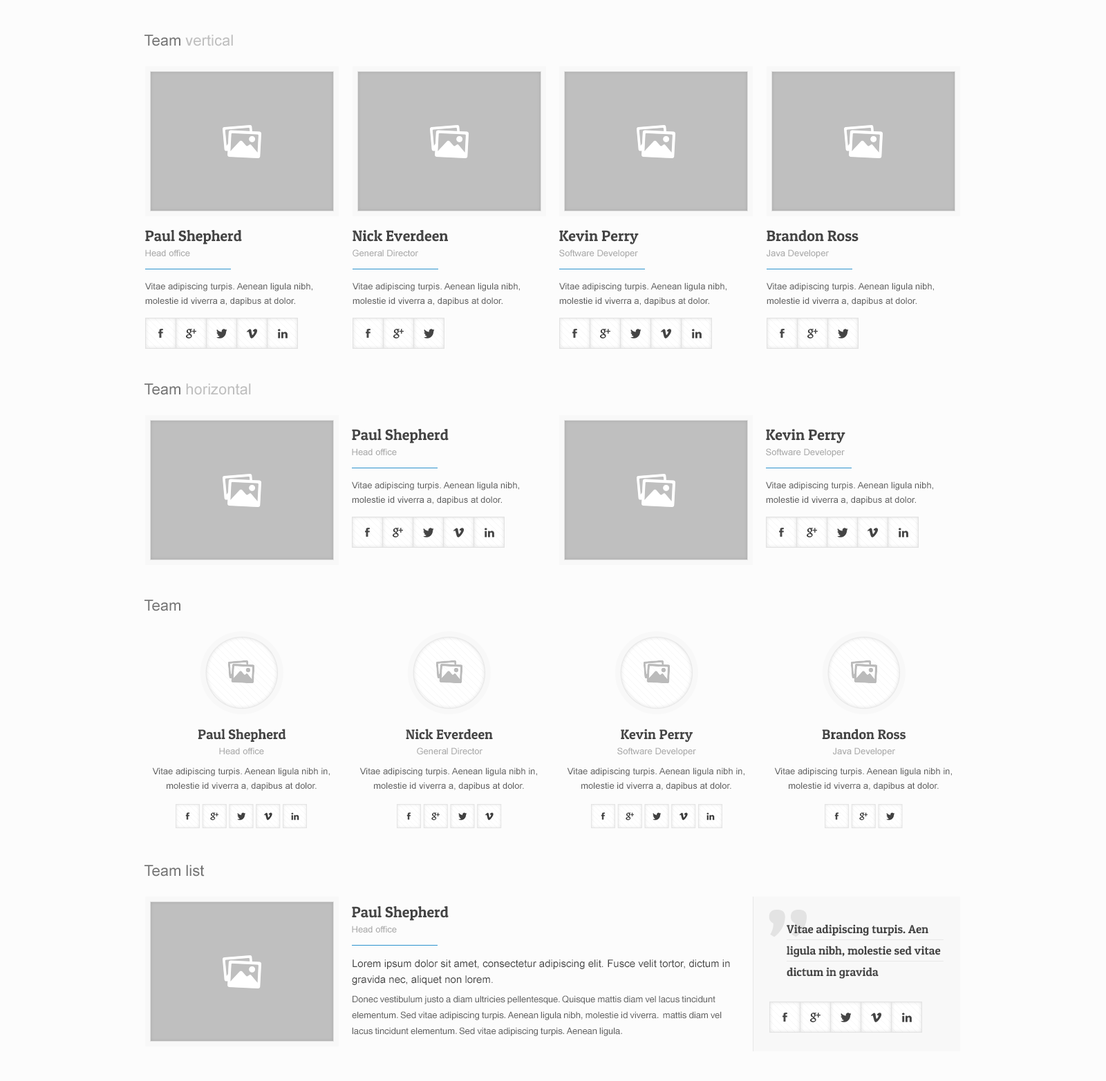
<style>
.page{position:relative;width:1106px;height:1081px;background:#fcfcfc}
.page>*{position:absolute;margin:0}
.t1{font:15.2px "ArialMT";color:#bfbfbf}
.t2{font:15.2px "ArialMT";color:#737373}
.t3{font:15.2px "PatuaOne-Regular";color:#444444}
.t4{font:9px "ArialMT";color:#a8a8a8}
.t5{font:9px/14.5px "ArialMT";color:#626262}
.t6{font:13.8px "PatuaOne-Regular";color:#444444}
.t7{font:11.7px/21.3px "PatuaOne-Regular";color:#444444}
.t8{font:10.4px/15.9px "ArialMT";color:#444444}
.t9{font:9px/15.9px "HelveticaWorld-Regular";color:#626262}
</style>
<div class="page">
<p class="t1" style="left:144px;top:35px;width:89px;height:11px"><span class="t2">Team </span>vertical</p>
<p class="t3" style="left:145px;top:230px;width:97px;height:15px">Paul Shepherd</p>
<p class="t3" style="left:352px;top:230px;width:96px;height:12px">Nick Everdeen</p>
<p class="t3" style="left:559px;top:230px;width:79px;height:15px">Kevin Perry</p>
<p class="t3" style="left:766px;top:230px;width:92px;height:12px">Brandon Ross</p>
<p class="t4" style="left:145px;top:249px;width:45px;height:7px">Head office</p>
<p class="t4" style="left:352px;top:249px;width:66px;height:8px">General Director</p>
<p class="t4" style="left:559px;top:249px;width:79px;height:9px">Software Developer</p>
<p class="t4" style="left:766px;top:249px;width:63px;height:9px">Java Developer</p>
<p class="t5" style="left:145px;top:283px;width:167px;height:23px">Vitae adipiscing turpis. Aenean ligula nibh, molestie id viverra a, dapibus at dolor.</p>
<p class="t5" style="left:352px;top:283px;width:168px;height:23px">Vitae adipiscing turpis. Aenean ligula nibh, molestie id viverra a, dapibus at dolor.</p>
<p class="t5" style="left:559px;top:283px;width:167px;height:23px">Vitae adipiscing turpis. Aenean ligula nibh, molestie id viverra a, dapibus at dolor.</p>
<p class="t5" style="left:766px;top:283px;width:168px;height:23px">Vitae adipiscing turpis. Aenean ligula nibh, molestie id viverra a, dapibus at dolor.</p>
<p class="t1" style="left:144px;top:384px;width:107px;height:11px"><span class="t2">Team </span>horizontal</p>
<p class="t3" style="left:352px;top:429px;width:96px;height:15px">Paul Shepherd</p>
<p class="t3" style="left:766px;top:429px;width:79px;height:15px">Kevin Perry</p>
<p class="t4" style="left:352px;top:448px;width:45px;height:7px">Head office</p>
<p class="t4" style="left:766px;top:448px;width:78px;height:9px">Software Developer</p>
<p class="t5" style="left:352px;top:482px;width:167px;height:23px">Vitae adipiscing turpis. Aenean ligula nibh, molestie id viverra a, dapibus at dolor.</p>
<p class="t5" style="left:766px;top:482px;width:167px;height:23px">Vitae adipiscing turpis. Aenean ligula nibh, molestie id viverra a, dapibus at dolor.</p>
<p class="t2" style="left:144px;top:600px;width:36px;height:12px">Team</p>
<p class="t6" style="left:198px;top:729px;width:88px;height:13px">Paul Shepherd</p>
<p class="t6" style="left:406px;top:729px;width:87px;height:11px">Nick Everdeen</p>
<p class="t6" style="left:621px;top:729px;width:72px;height:14px">Kevin Perry</p>
<p class="t6" style="left:822px;top:729px;width:83px;height:11px">Brandon Ross</p>
<p class="t4" style="left:219px;top:748px;width:45px;height:7px">Head office</p>
<p class="t4" style="left:417px;top:748px;width:65px;height:7px">General Director</p>
<p class="t4" style="left:617px;top:748px;width:79px;height:9px">Software Developer</p>
<p class="t4" style="left:833px;top:748px;width:62px;height:9px">Java Developer</p>
<p class="t5" style="left:152px;top:768px;width:178px;height:23px;text-align:center">Vitae adipiscing turpis. Aenean ligula nibh in, molestie id viverra a, dapibus at dolor.</p>
<p class="t5" style="left:359px;top:768px;width:178px;height:23px;text-align:center">Vitae adipiscing turpis. Aenean ligula nibh in, molestie id viverra a, dapibus at dolor.</p>
<p class="t5" style="left:567px;top:768px;width:177px;height:23px;text-align:center">Vitae adipiscing turpis. Aenean ligula nibh in, molestie id viverra a, dapibus at dolor.</p>
<p class="t5" style="left:774px;top:768px;width:178px;height:23px;text-align:center">Vitae adipiscing turpis. Aenean ligula nibh in, molestie id viverra a, dapibus at dolor.</p>
<p class="t2" style="left:144px;top:865px;width:61px;height:12px">Team list</p>
<p class="t3" style="left:352px;top:907px;width:96px;height:14px">Paul Shepherd</p>
<p class="t4" style="left:352px;top:926px;width:45px;height:7px">Head office</p>
<p class="t7" style="left:786px;top:925px;width:154px;height:54px">Vitae adipiscing turpis. Aen<br>ligula nibh, molestie sed vitae<br>dictum in gravida</p>
<p class="t8" style="left:352px;top:960px;width:378px;height:25px">Lorem ipsum dolor sit amet, consectetur adipiscing elit. Fusce velit tortor, dictum in gravida nec, aliquet non lorem.</p>
<p class="t9" style="left:352px;top:996px;width:369px;height:41px">Donec vestibulum justo a diam ultricies pellentesque. Quisque mattis diam vel lacus tincidunt elementum. Sed vitae adipiscing turpis. Aenean ligula nibh, molestie id viverra.  mattis diam vel lacus tincidunt elementum. Sed vitae adipiscing turpis. Aenean ligula.</p>
</div>
